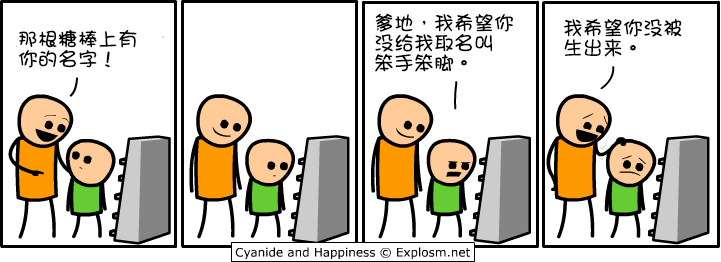
<style>
.page{position:relative;width:721px;height:262px;background:#ffffff}
.page>*{position:absolute;margin:0}
.t1{font:20px/20px "DFGirl";color:#000000}
</style>
<div class="page">
<p class="t1" style="left:375px;top:13px;width:138px;height:59px">爹地，我希望你<br>没给我取名叫<br>笨手笨脚。</p>
<p class="t1" style="left:18px;top:29px;width:119px;height:39px">那根糖棒上有<br>你的名字！</p>
<p class="t1" style="left:563px;top:18px;width:119px;height:39px">我希望你没被<br>生出来。</p>
</div>
